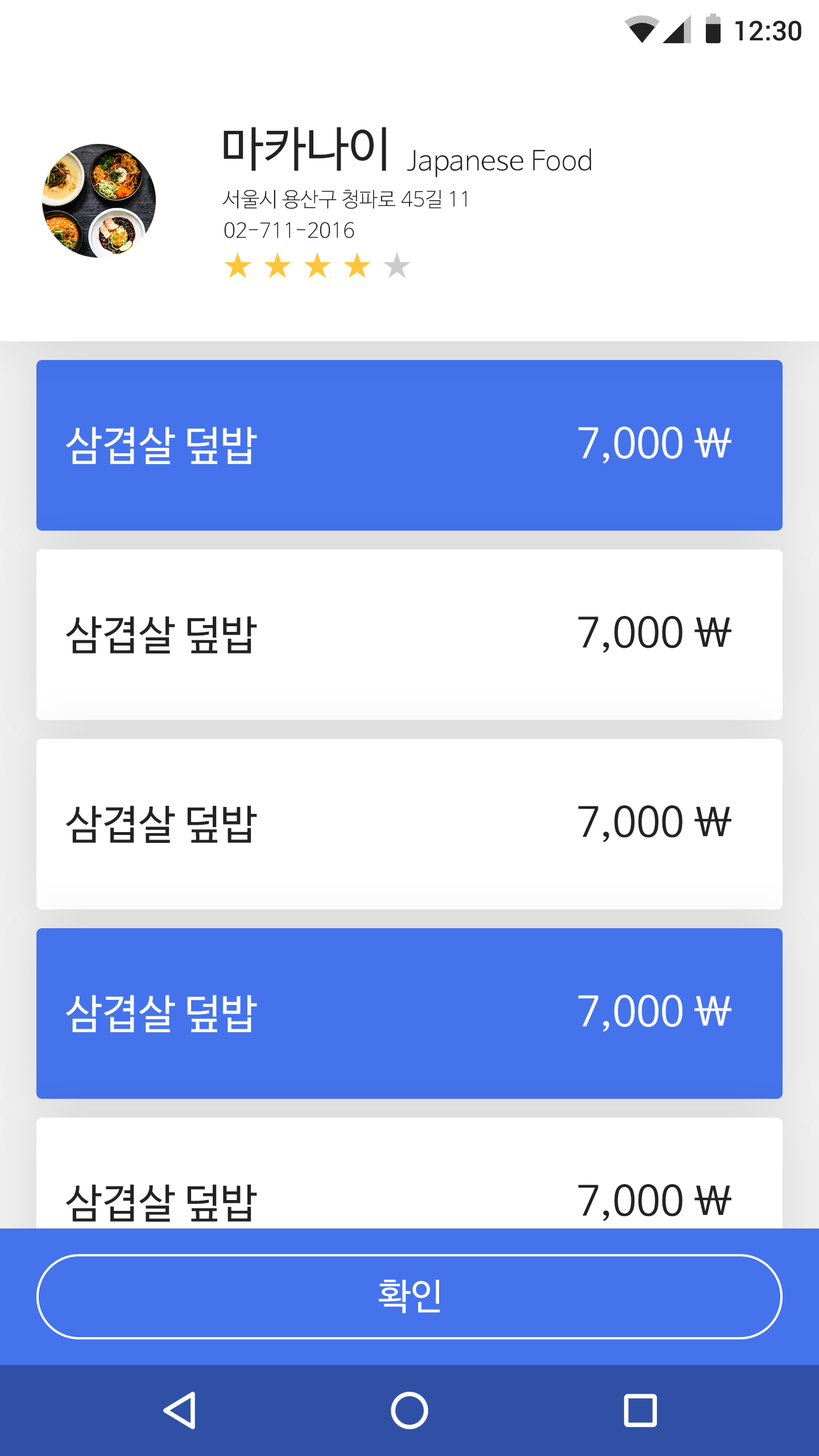
<style>
.page{position:relative;width:819px;height:1456px;background:#ffffff}
.page>*{position:absolute;margin:0}
.t1{font:27.3px "Roboto-Medium";color:#222222}
.t2{font:47.8px "NanumBarunGothic";color:#222222}
.t3{font:27.3px "NanumBarunGothicLight";color:#222222}
.t4{font:20.5px "NanumBarunGothicLight";color:#222222}
.t5{font:40.9px "NanumBarunGothic";color:#ffffff}
.t6{font:40.9px "NanumBarunGothic";color:#222222}
.t7{font:36.4px "NanumBarunGothic";color:#ffffff}
</style>
<div class="page">
<p class="t1" style="left:735px;top:20px;width:66px;height:21px">12:30</p>
<p class="t2" style="left:224px;top:127px;width:162px;height:44px">마카나이</p>
<p class="t3" style="left:407px;top:148px;width:184px;height:29px">Japanese Food</p>
<p class="t4" style="left:222px;top:189px;width:244px;height:20px">서울시 용산구 청파로 45길 11</p>
<p class="t4" style="left:224px;top:222px;width:130px;height:16px">02-711-2016</p>
<p class="t5" style="left:65px;top:427px;width:192px;height:37px">삼겹살 덮밥</p>
<p class="t5" style="left:578px;top:427px;width:153px;height:37px">7,000 \</p>
<p class="t6" style="left:65px;top:616px;width:192px;height:37px">삼겹살 덮밥</p>
<p class="t6" style="left:578px;top:616px;width:153px;height:37px">7,000 \</p>
<p class="t6" style="left:65px;top:805px;width:192px;height:38px">삼겹살 덮밥</p>
<p class="t6" style="left:578px;top:805px;width:153px;height:37px">7,000 \</p>
<p class="t5" style="left:65px;top:995px;width:192px;height:37px">삼겹살 덮밥</p>
<p class="t5" style="left:578px;top:995px;width:153px;height:37px">7,000 \</p>
<p class="t6" style="left:65px;top:1184px;width:192px;height:38px">삼겹살 덮밥</p>
<p class="t6" style="left:578px;top:1184px;width:153px;height:37px">7,000 \</p>
<p class="t7" style="left:379px;top:1280px;width:61px;height:33px">확인</p>
</div>
